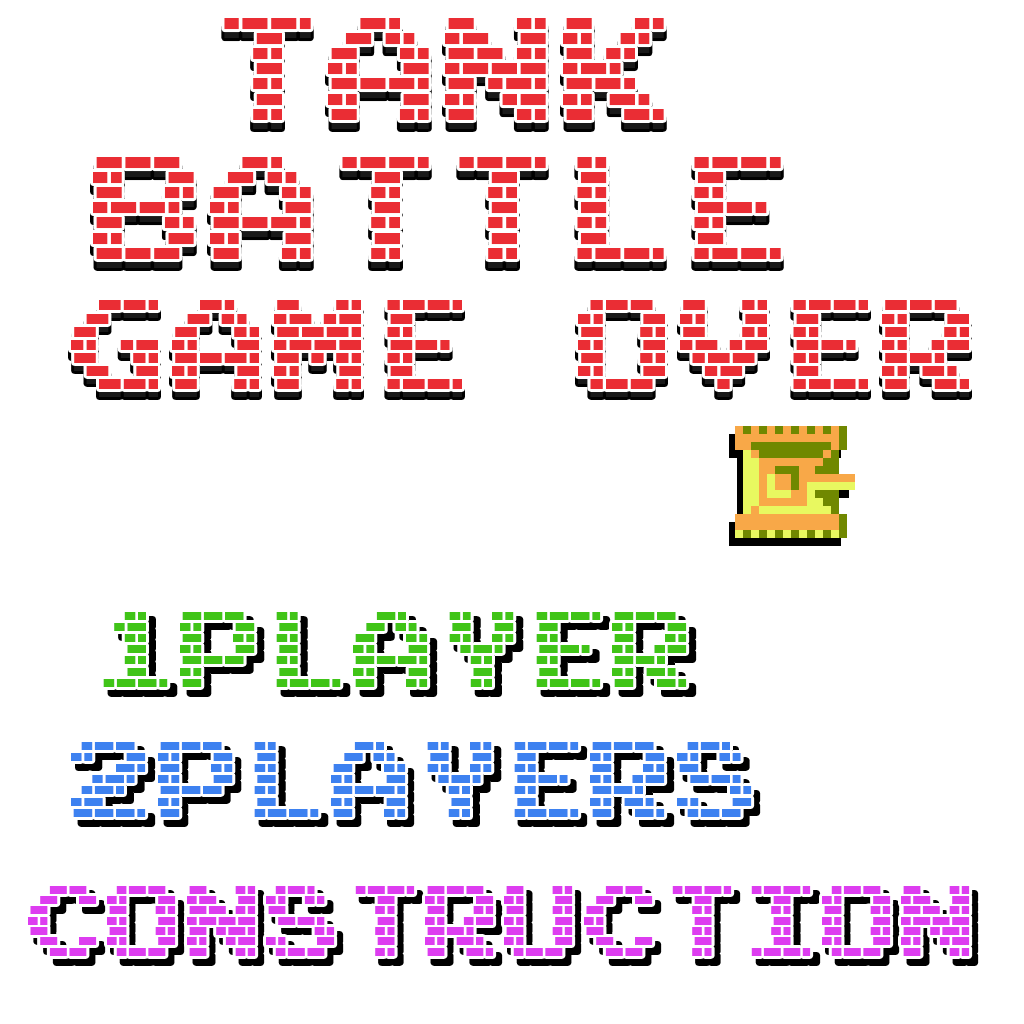
<style>
.page{position:relative;width:1024px;height:1024px;background:#ffffff}
.page>*{position:absolute;margin:0}
.t1{font:121.6px/139.2px "M10_BATTLE-CITIES";letter-spacing:0.02em;scale:0.95 1}
.t2{font:121.6px/139.2px "M10_BATTLE-CITIES";letter-spacing:0.02em;color:#ea2d34;scale:0.95 1}
.t3{font:104.6px "M10_BATTLE-CITIES";letter-spacing:0.02em;color:#ea2d34;scale:0.95 1}
.t4{font:104.6px "M10_BATTLE-CITIES";letter-spacing:0.02em;scale:0.95 1}
.t5{font:89.7px "M10_BATTLE-CITIES";letter-spacing:0.02em;color:#40c417;scale:0.95 1}
.t6{font:89.7px "M10_BATTLE-CITIES";letter-spacing:0.02em;color:#3d81f0;scale:0.95 1}
.t7{font:82.7px "M10_BATTLE-CITIES";letter-spacing:0.02em;color:#dd3df0;scale:0.94 1}
</style>
<div class="page">
<p class="t1" style="left:93px;top:27px;width:688px;height:241px;text-align:right">TANK <br>BATTLE</p>
<p class="t2" style="left:93px;top:18px;width:688px;height:241px;text-align:right">TANK <br>BATTLE</p>
<p class="t3" style="left:71px;top:300px;width:898px;height:89px">GAME Over</p>
<p class="t4" style="left:71px;top:308px;width:898px;height:89px">Game Over</p>
<p class="t5" style="left:103px;top:612px;width:584px;height:75px">1Player</p>
<p class="t6" style="left:71px;top:742px;width:681px;height:75px">2Players</p>
<p class="t7" style="left:28px;top:886px;width:942px;height:70px">Construction</p>
</div>
